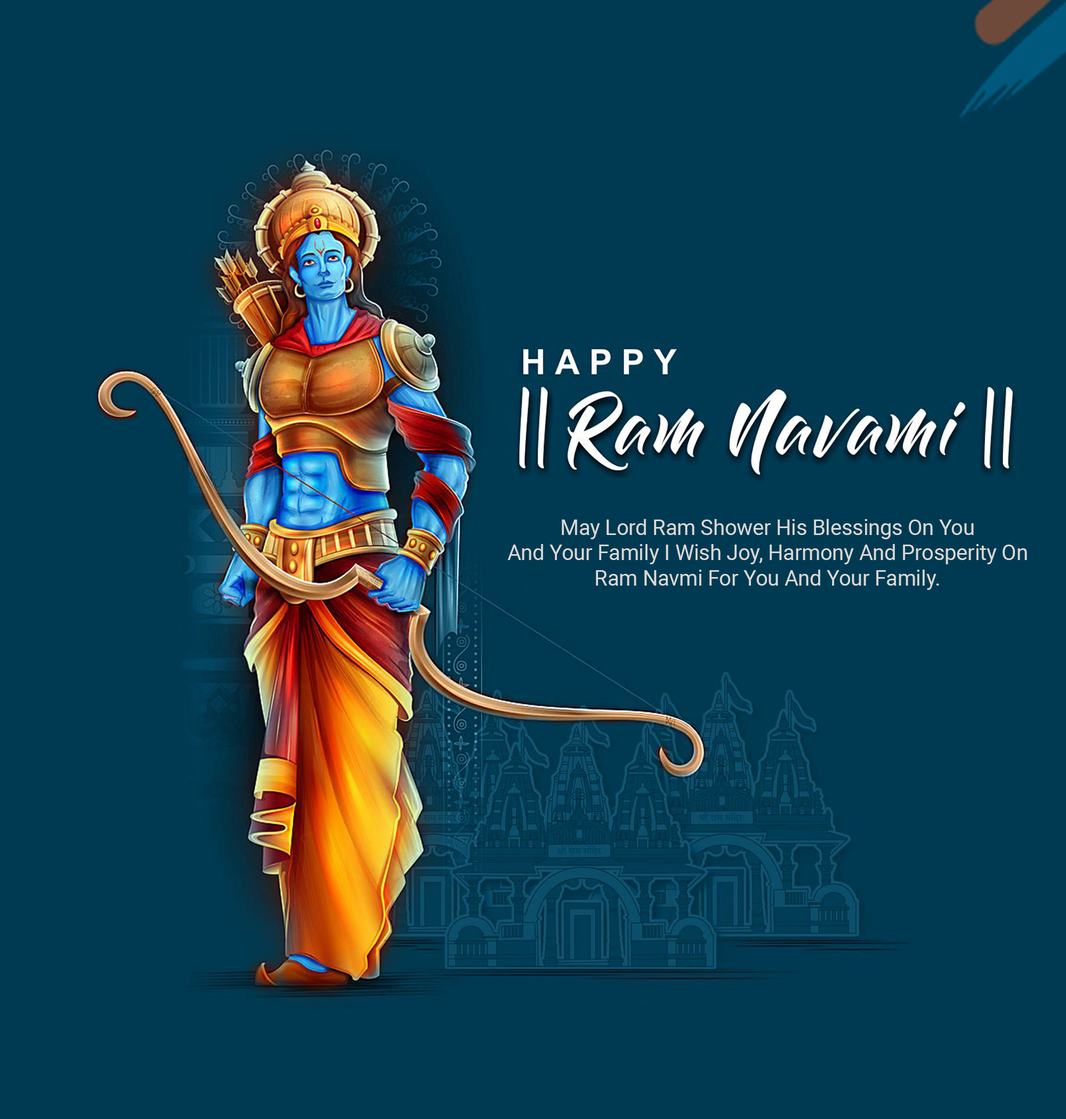
<style>
.page{position:relative;width:1066px;height:1119px;background:#003a52}
.page>*{position:absolute;margin:0}
.t1{font:21px "Roboto-Regular";color:#dad9d7}
</style>
<div class="page">
<p class="t1" style="left:507px;top:519px;width:520px;height:71px;text-align:center">May Lord Ram Shower His Blessings On You<br>And Your Family I Wish Joy, Harmony And Prosperity On<br>Ram Navmi For You And Your Family.</p>
</div>
